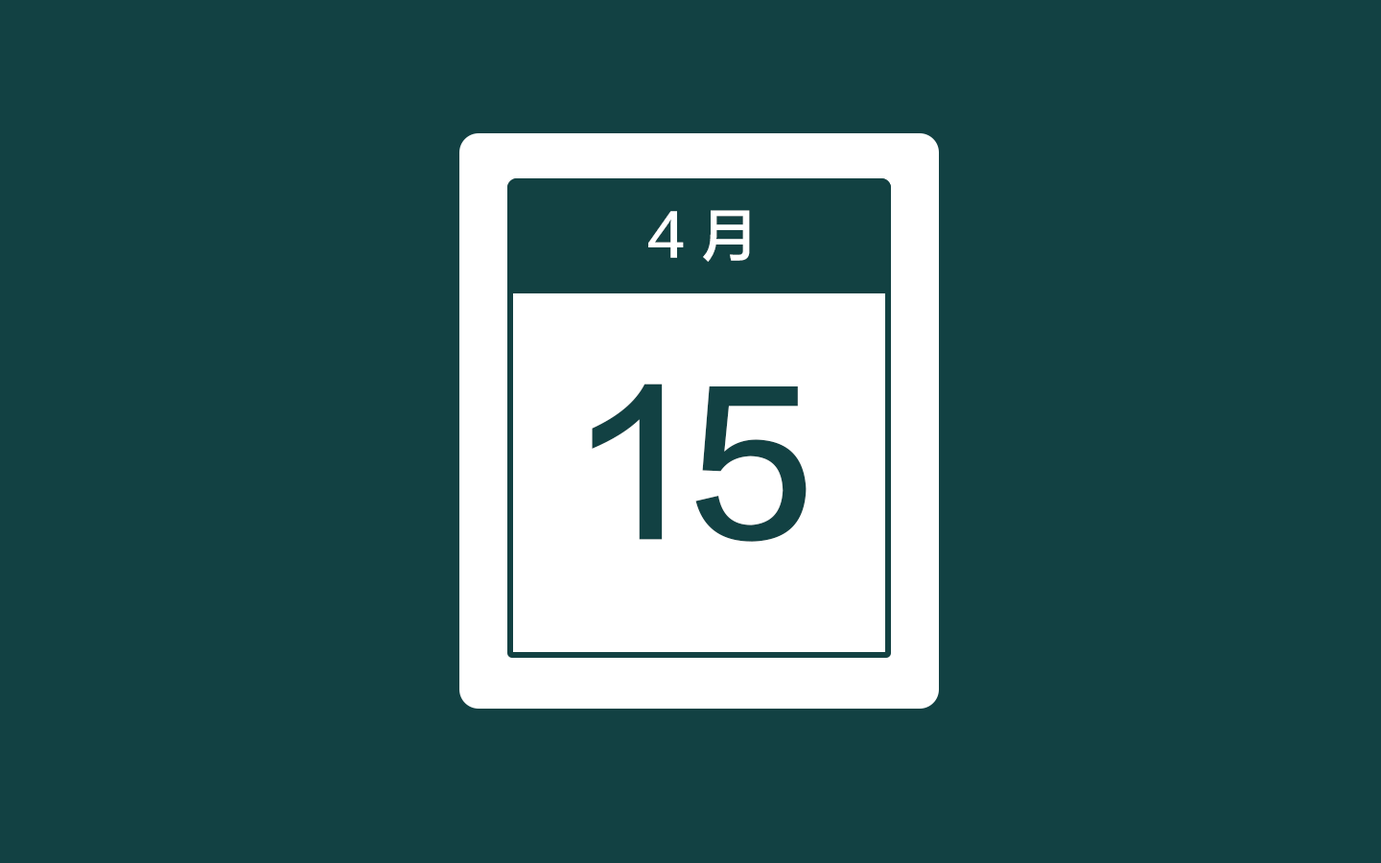
<style>
.page{position:relative;width:1381px;height:863px;background:#124143}
.page>*{position:absolute;margin:0}
.t1{font:57.6px "FZLTZHK--GBK1-0";color:#ffffff}
.t2{font:191.8px "FZLTZHK--GBK1-0";color:#124143}
</style>
<div class="page">
<p class="t1" style="left:648px;top:210px;width:102px;height:52px">4月</p>
<p class="t2" style="left:592px;top:384px;width:215px;height:158px">15</p>
</div>
